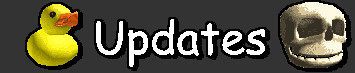
<style>
.page{position:relative;width:355px;height:73px;background:#333333}
.page>*{position:absolute;margin:0}
.t1{font:45px "ComicSansMS";color:#ffffff}
</style>
<div class="page">
<p class="t1" style="left:96px;top:19px;width:169px;height:48px">Updates</p>
</div>
